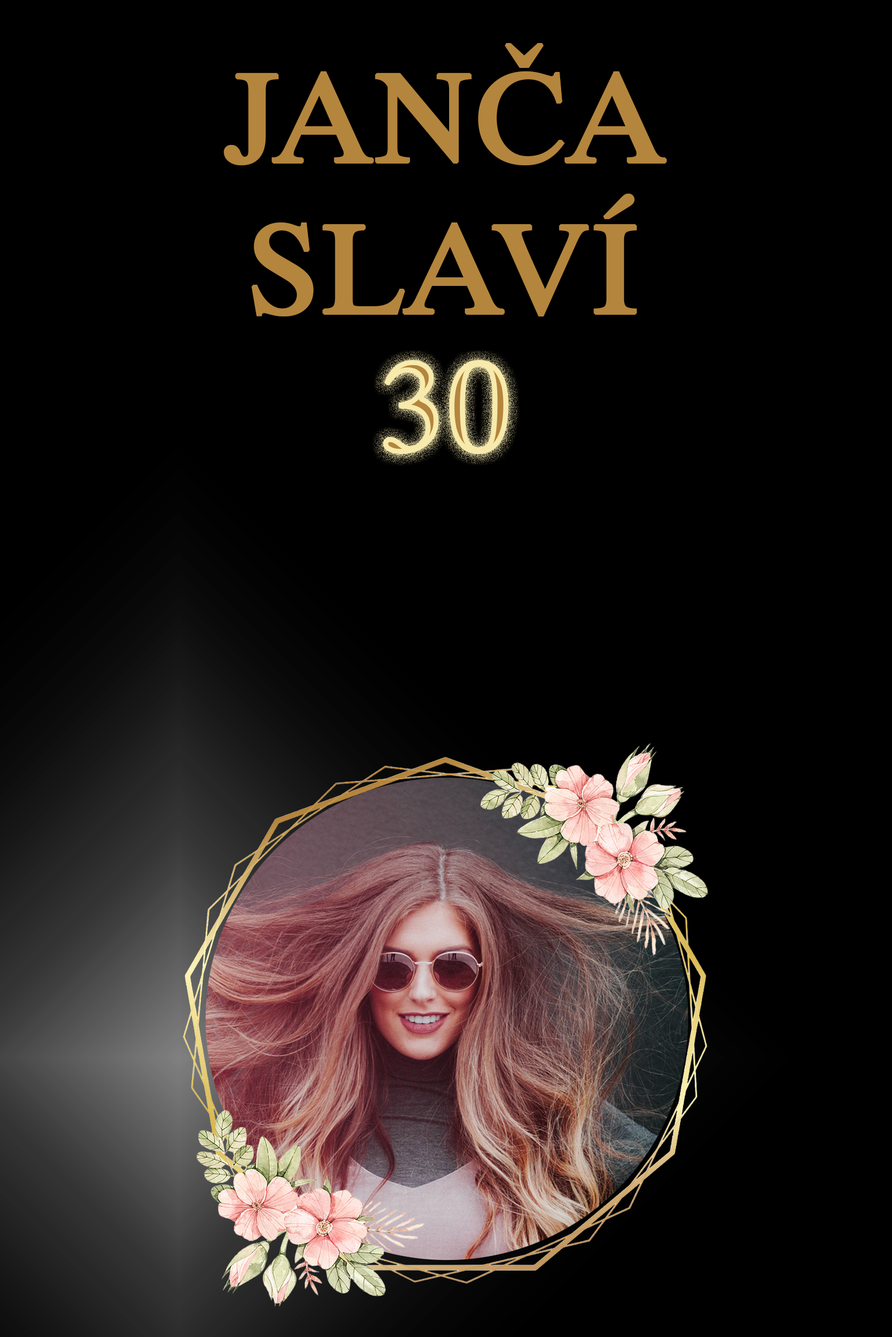
<style>
.page{position:relative;width:892px;height:1337px;background:#000000}
.page>*{position:absolute;margin:0}
.t1{font:125.8px "Dutch801BT-Roman";color:#b4853d;font-weight:bold}
.t2{font:125.8px "Dutch801BT-Roman";color:#f7eaac;font-weight:bold}
</style>
<div class="page">
<p class="t1" style="left:224px;top:43px;width:443px;height:274px;text-align:center">JANČA<br>SLAVÍ</p>
<p class="t2" style="left:383px;top:360px;width:125px;height:95px">30</p>
</div>
